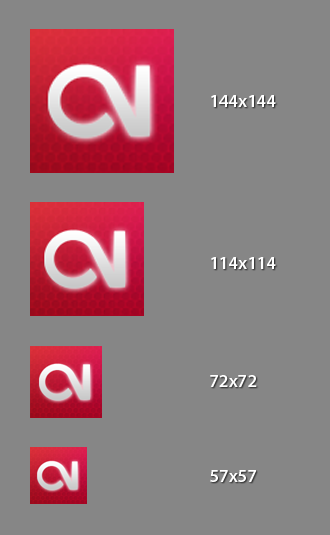
<style>
.page{position:relative;width:330px;height:535px;background:#868686}
.page>*{position:absolute;margin:0}
.t1{font:18px "MyriadPro-Semibold";color:#ffffff}
</style>
<div class="page">
<p class="t1" style="left:211px;top:95px;width:65px;height:12px">144x144</p>
<p class="t1" style="left:211px;top:257px;width:65px;height:12px">114x114</p>
<p class="t1" style="left:210px;top:375px;width:47px;height:12px">72x72</p>
<p class="t1" style="left:210px;top:470px;width:46px;height:12px">57x57</p>
</div>
